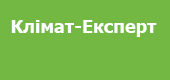
<style>
.page{position:relative;width:170px;height:80px;background:#72b842}
.page>*{position:absolute;margin:0}
.t1{font:18px "Tahoma-Bold";color:#ffffff}
</style>
<div class="page">
<p class="t1" style="left:11px;top:20px;width:146px;height:17px">Клімат-Експерт</p>
</div>
